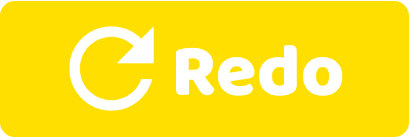
<style>
.page{position:relative;width:410px;height:137px;background:#ffdf00}
.page>*{position:absolute;margin:0}
.t1{font:75px "Baloo-Regular";color:#ffffff}
</style>
<div class="page">
<p class="t1" style="left:175px;top:44px;width:168px;height:52px">Redo</p>
</div>
